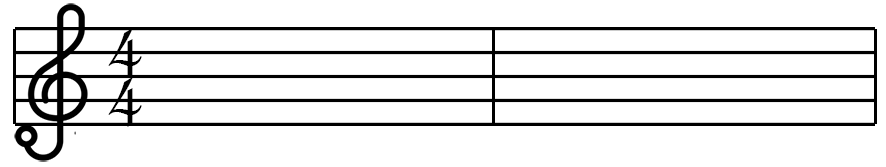
<style>
.page{position:relative;width:886px;height:167px;background:#ffffff}
.page>*{position:absolute;margin:0}
.t1{font:95.4px "FrenchScriptMT";color:#000000}
</style>
<div class="page">
<p class="t1" style="left:108px;top:28px;width:34px;height:50px">4</p>
<p class="t1" style="left:108px;top:77px;width:34px;height:50px">4</p>
</div>
